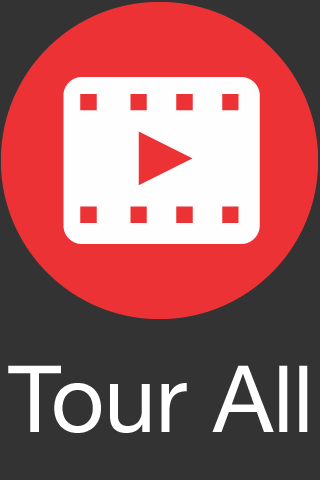
<style>
.page{position:relative;width:320px;height:480px;background:#333333}
.page>*{position:absolute;margin:0}
.t1{font:92.7px "HelveticaNeueLTCom-Roman";color:#ffffff}
</style>
<div class="page">
<p class="t1" style="left:8px;top:365px;width:300px;height:68px">Tour All</p>
</div>
